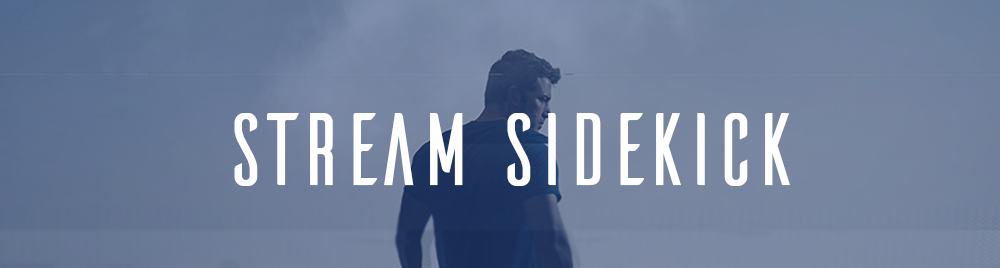
<style>
.page{position:relative;width:1000px;height:268px}
.page>*{position:absolute;margin:0}
.t1{font:180px "Ailerons";color:#ffffff}
</style>
<div class="page">
<p class="t1" style="left:234px;top:113px;width:556px;height:73px">stream sidekick</p>
</div>
